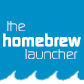
<style>
.page{position:relative;width:84px;height:84px;background:#0090c8}
.page>*{position:absolute;margin:0}
.t1{font:14px "ContinuumLight"}
.t2{font:18px "ContinuumBold";color:#ffffff}
</style>
<div class="page">
<p class="t1" style="left:7px;top:21px;width:18px;height:10px">the</p>
<p class="t2" style="left:3px;top:33px;width:78px;height:14px">homebrew</p>
<p class="t1" style="left:25px;top:49px;width:53px;height:10px">launcher</p>
</div>
